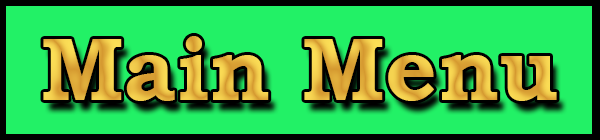
<style>
.page{position:relative;width:600px;height:140px;background:#22f166}
.page>*{position:absolute;margin:0}
.t1{font:90px "BookmanOldStyle-Bold"}
</style>
<div class="page">
<p class="t1" style="left:43px;top:36px;width:514px;height:65px">Main Menu</p>
</div>
